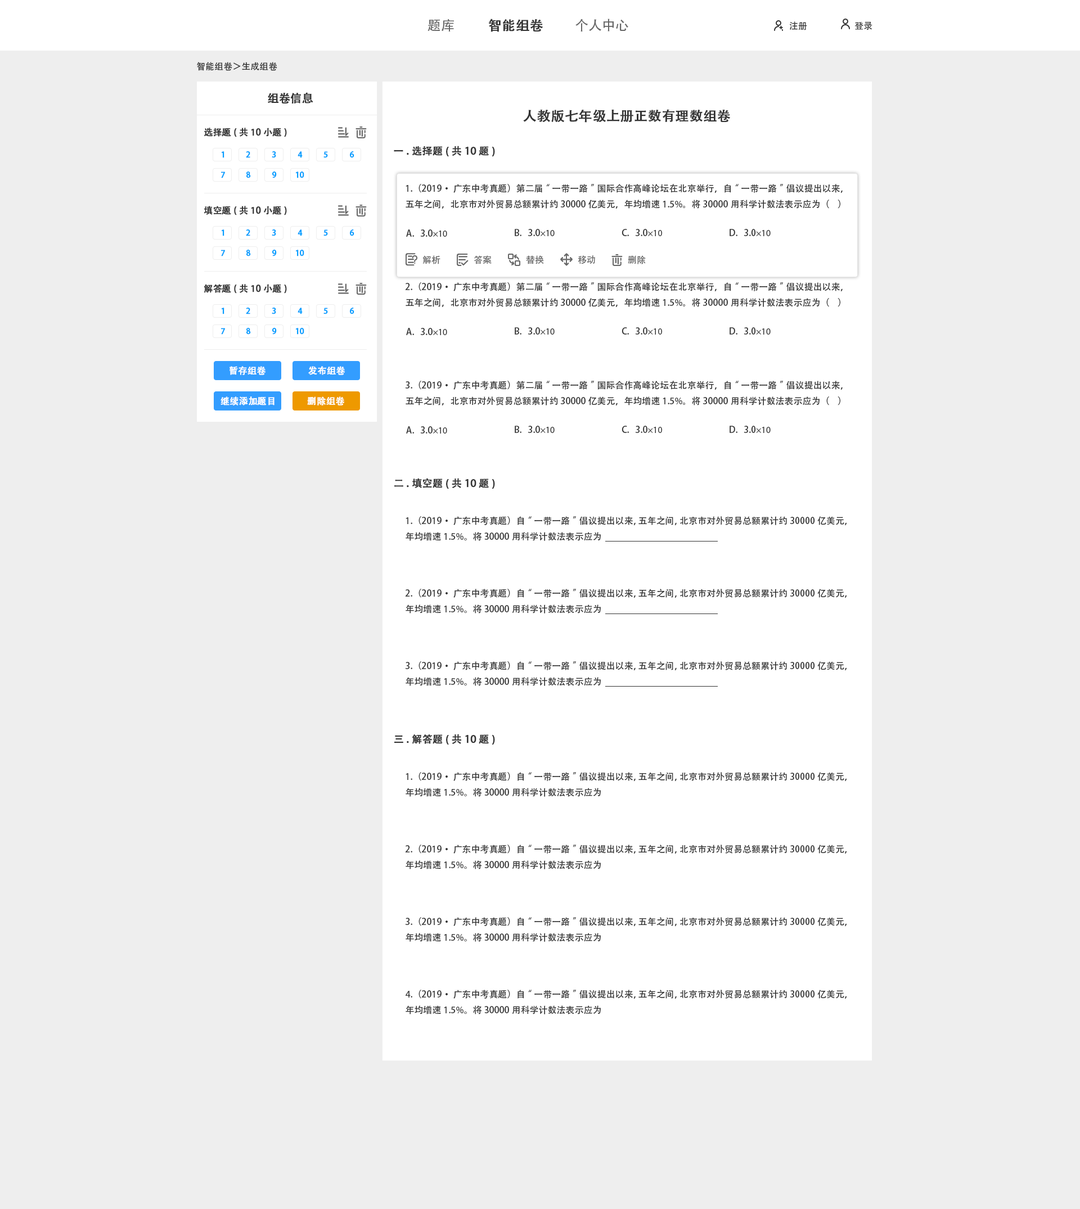
<style>
.page{position:relative;width:1080px;height:1209px;background:#eeeeee}
.page>*{position:absolute;margin:0}
.t1{font:13.5px "AdobeHeitiStd-Regular";color:#666666}
.t2{font:13.5px "AdobeHeitiStd-Regular";color:#333333;font-weight:bold}
.t3{font:9px "AdobeHeitiStd-Regular";color:#333333}
.t4{font:11.2px "AdobeHeitiStd-Regular";color:#333333;font-weight:bold}
.t5{font:9px "AdobeHeitiStd-Regular";color:#333333;font-weight:bold}
.t6{font:10.1px "AdobeHeitiStd-Regular";color:#333333;font-weight:bold}
.t7{font:7.9px "AdobeHeitiStd-Regular";color:#049eff;font-weight:bold}
.t8{font:9px "MyriadPro-Regular";color:#333333}
.t9{font:9px "AdobeHeitiStd-Regular";color:#666666}
.t10{font:9px "AdobeHeitiStd-Regular";color:#ffffff;font-weight:bold}
</style>
<div class="page">
<p class="t1" style="left:428px;top:19px;width:26px;height:13px">题库</p>
<p class="t2" style="left:489px;top:19px;width:54px;height:13px">智能组卷</p>
<p class="t1" style="left:575px;top:19px;width:53px;height:13px">个人中心</p>
<p class="t3" style="left:789px;top:21px;width:18px;height:9px">注册</p>
<p class="t3" style="left:854px;top:21px;width:18px;height:9px">登录</p>
<p class="t3" style="left:197px;top:62px;width:80px;height:9px">智能组卷＞生成组卷</p>
<p class="t4" style="left:268px;top:92px;width:45px;height:12px">组卷信息</p>
<p class="t2" style="left:523px;top:109px;width:207px;height:14px">人教版七年级上册正数有理数组卷</p>
<p class="t5" style="left:204px;top:128px;width:83px;height:9px">选择题(共10小题)</p>
<p class="t6" style="left:394px;top:146px;width:101px;height:11px">一.选择题(共10题)</p>
<p class="t7" style="left:221px;top:151px;width:3px;height:7px">1</p>
<p class="t7" style="left:246px;top:151px;width:4px;height:7px">2</p>
<p class="t7" style="left:272px;top:151px;width:4px;height:7px">3</p>
<p class="t7" style="left:298px;top:151px;width:5px;height:7px">4</p>
<p class="t7" style="left:323px;top:151px;width:5px;height:7px">5</p>
<p class="t7" style="left:350px;top:151px;width:4px;height:7px">6</p>
<p class="t7" style="left:221px;top:172px;width:4px;height:6px">7</p>
<p class="t7" style="left:246px;top:172px;width:5px;height:6px">8</p>
<p class="t7" style="left:272px;top:172px;width:5px;height:6px">9</p>
<p class="t7" style="left:295px;top:172px;width:9px;height:6px">10</p>
<p class="t3" style="left:406px;top:184px;width:437px;height:25px">1.（2019·广东中考真题）第二届“一带一路”国际合作高峰论坛在北京举行，自“一带一路”倡议提出以来，五年之间，北京市对外贸易总额累计约30000亿美元，年均增速1.5%。将30000用科学计数法表示应为（    ）</p>
<p class="t5" style="left:204px;top:206px;width:83px;height:9px">填空题(共10小题)</p>
<p class="t7" style="left:221px;top:230px;width:3px;height:6px">1</p>
<p class="t7" style="left:246px;top:230px;width:4px;height:6px">2</p>
<p class="t7" style="left:272px;top:230px;width:4px;height:6px">3</p>
<p class="t7" style="left:298px;top:230px;width:5px;height:6px">4</p>
<p class="t7" style="left:323px;top:230px;width:5px;height:6px">5</p>
<p class="t7" style="left:350px;top:230px;width:4px;height:6px">6</p>
<p class="t3" style="left:406px;top:230px;width:41px;height:7px">A.   3.0<span class="t8">×10</span></p>
<p class="t3" style="left:515px;top:229px;width:40px;height:7px">B.   3.0<span class="t8">×10</span></p>
<p class="t3" style="left:622px;top:229px;width:40px;height:7px">C.   3.0<span class="t8">×10</span></p>
<p class="t3" style="left:730px;top:229px;width:41px;height:7px">D.   3.0<span class="t8">×10</span></p>
<p class="t7" style="left:221px;top:250px;width:4px;height:6px">7</p>
<p class="t7" style="left:246px;top:250px;width:5px;height:6px">8</p>
<p class="t7" style="left:272px;top:250px;width:5px;height:6px">9</p>
<p class="t7" style="left:295px;top:250px;width:9px;height:6px">10</p>
<p class="t9" style="left:422px;top:255px;width:18px;height:9px">解析</p>
<p class="t9" style="left:474px;top:255px;width:18px;height:9px">答案</p>
<p class="t9" style="left:526px;top:255px;width:18px;height:9px">替换</p>
<p class="t9" style="left:578px;top:255px;width:17px;height:9px">移动</p>
<p class="t9" style="left:628px;top:255px;width:18px;height:9px">删除</p>
<p class="t5" style="left:204px;top:284px;width:83px;height:10px">解答题(共10小题)</p>
<p class="t3" style="left:405px;top:282px;width:438px;height:25px">2.（2019·广东中考真题）第二届“一带一路”国际合作高峰论坛在北京举行，自“一带一路”倡议提出以来，五年之间，北京市对外贸易总额累计约30000亿美元，年均增速1.5%。将30000用科学计数法表示应为（    ）</p>
<p class="t7" style="left:221px;top:308px;width:3px;height:6px">1</p>
<p class="t7" style="left:246px;top:308px;width:4px;height:6px">2</p>
<p class="t7" style="left:272px;top:308px;width:4px;height:6px">3</p>
<p class="t7" style="left:298px;top:308px;width:5px;height:6px">4</p>
<p class="t7" style="left:323px;top:308px;width:5px;height:6px">5</p>
<p class="t7" style="left:350px;top:308px;width:4px;height:6px">6</p>
<p class="t7" style="left:221px;top:328px;width:4px;height:7px">7</p>
<p class="t7" style="left:246px;top:328px;width:5px;height:7px">8</p>
<p class="t7" style="left:272px;top:328px;width:5px;height:7px">9</p>
<p class="t7" style="left:295px;top:328px;width:9px;height:7px">10</p>
<p class="t3" style="left:406px;top:328px;width:41px;height:7px">A.   3.0<span class="t8">×10</span></p>
<p class="t3" style="left:515px;top:327px;width:40px;height:8px">B.   3.0<span class="t8">×10</span></p>
<p class="t3" style="left:622px;top:327px;width:40px;height:8px">C.   3.0<span class="t8">×10</span></p>
<p class="t3" style="left:730px;top:327px;width:41px;height:8px">D.   3.0<span class="t8">×10</span></p>
<p class="t10" style="left:230px;top:366px;width:36px;height:9px">暂存组卷</p>
<p class="t10" style="left:308px;top:366px;width:37px;height:9px">发布组卷</p>
<p class="t3" style="left:405px;top:381px;width:438px;height:25px">3.（2019·广东中考真题）第二届“一带一路”国际合作高峰论坛在北京举行，自“一带一路”倡议提出以来，五年之间，北京市对外贸易总额累计约30000亿美元，年均增速1.5%。将30000用科学计数法表示应为（    ）</p>
<p class="t10" style="left:220px;top:397px;width:54px;height:9px">继续添加题目</p>
<p class="t10" style="left:307px;top:397px;width:38px;height:9px">删除组卷</p>
<p class="t3" style="left:515px;top:426px;width:40px;height:7px">B.   3.0<span class="t8">×10</span></p>
<p class="t3" style="left:622px;top:426px;width:40px;height:7px">C.   3.0<span class="t8">×10</span></p>
<p class="t3" style="left:730px;top:426px;width:41px;height:7px">D.   3.0<span class="t8">×10</span></p>
<p class="t3" style="left:406px;top:426px;width:41px;height:8px">A.   3.0<span class="t8">×10</span></p>
<p class="t6" style="left:394px;top:478px;width:101px;height:11px">二.填空题(共10题)</p>
<p class="t3" style="left:406px;top:516px;width:441px;height:25px">1.（2019·广东中考真题）自“一带一路”倡议提出以来，五年之间，北京市对外贸易总额累计约30000亿美元，年均增速1.5%。将30000用科学计数法表示应为</p>
<p class="t3" style="left:405px;top:589px;width:442px;height:25px">2.（2019·广东中考真题）自“一带一路”倡议提出以来，五年之间，北京市对外贸易总额累计约30000亿美元，年均增速1.5%。将30000用科学计数法表示应为</p>
<p class="t3" style="left:405px;top:662px;width:442px;height:24px">3.（2019·广东中考真题）自“一带一路”倡议提出以来，五年之间，北京市对外贸易总额累计约30000亿美元，年均增速1.5%。将30000用科学计数法表示应为</p>
<p class="t6" style="left:394px;top:734px;width:101px;height:11px">三.解答题(共10题)</p>
<p class="t3" style="left:406px;top:772px;width:441px;height:25px">1.（2019·广东中考真题）自“一带一路”倡议提出以来，五年之间，北京市对外贸易总额累计约30000亿美元，年均增速1.5%。将30000用科学计数法表示应为</p>
<p class="t3" style="left:405px;top:845px;width:442px;height:25px">2.（2019·广东中考真题）自“一带一路”倡议提出以来，五年之间，北京市对外贸易总额累计约30000亿美元，年均增速1.5%。将30000用科学计数法表示应为</p>
<p class="t3" style="left:405px;top:917px;width:442px;height:25px">3.（2019·广东中考真题）自“一带一路”倡议提出以来，五年之间，北京市对外贸易总额累计约30000亿美元，年均增速1.5%。将30000用科学计数法表示应为</p>
<p class="t3" style="left:406px;top:990px;width:441px;height:25px">4.（2019·广东中考真题）自“一带一路”倡议提出以来，五年之间，北京市对外贸易总额累计约30000亿美元，年均增速1.5%。将30000用科学计数法表示应为</p>
</div>
